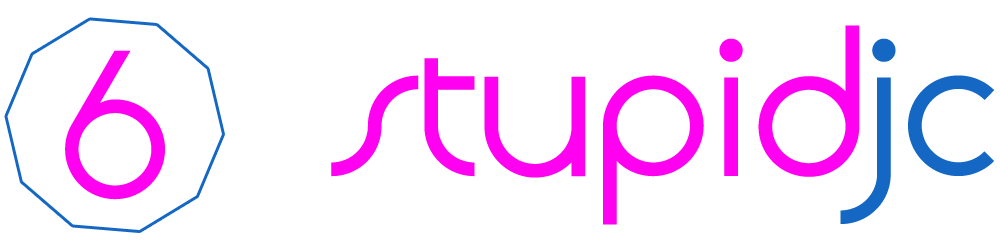
<style>
.page{position:relative;width:1000px;height:250px;background:#ffffff}
.page>*{position:absolute;margin:0}
.t1{font:200px "Quadranta";color:#ff00f0}
.t2{font:200px "Quadranta";color:#1567c4}
</style>
<div class="page">
<p class="t1" style="left:331px;top:25px;width:663px;height:200px">stupid<span class="t2">jc</span></p>
<p class="t1" style="left:65px;top:50px;width:100px;height:150px">6</p>
</div>
